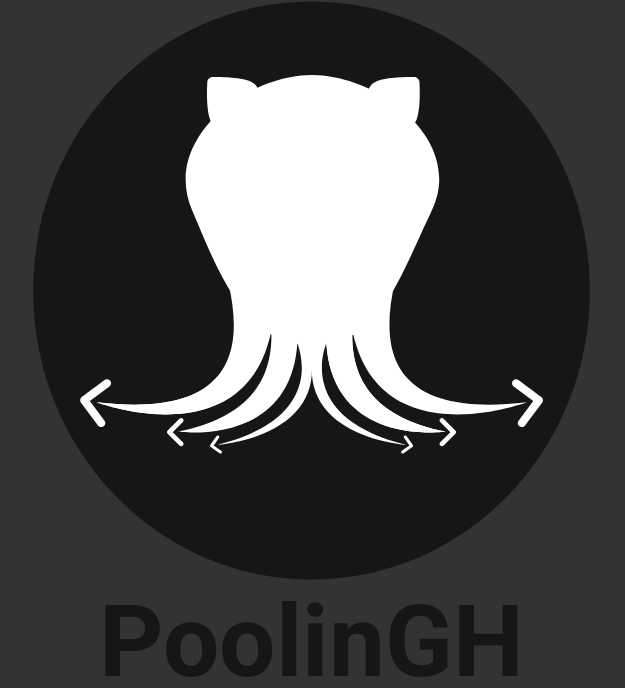
<style>
.page{position:relative;width:625px;height:688px;background:#161616}
.page>*{position:absolute;margin:0}
.t1{font:100px "Roboto-Bold";color:#161616}
</style>
<div class="page">
<p class="t1" style="left:105px;top:601px;width:413px;height:76px">PoolinGH</p>
</div>
